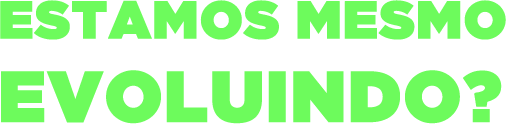
<style>
.page{position:relative;width:506px;height:124px;background:#ffffff}
.page>*{position:absolute;margin:0}
.t1{font:53.3px "GothamUltra";color:#6dfb5c;font-weight:bold}
.t2{font:71.9px "GothamUltra";color:#6dfb5c;font-weight:bold}
</style>
<div class="page">
<p class="t1" style="left:0px;top:0px;width:506px;height:40px">ESTAMOS MESMO</p>
<p class="t2" style="left:1px;top:70px;width:501px;height:54px">EVOLUINDO?</p>
</div>
